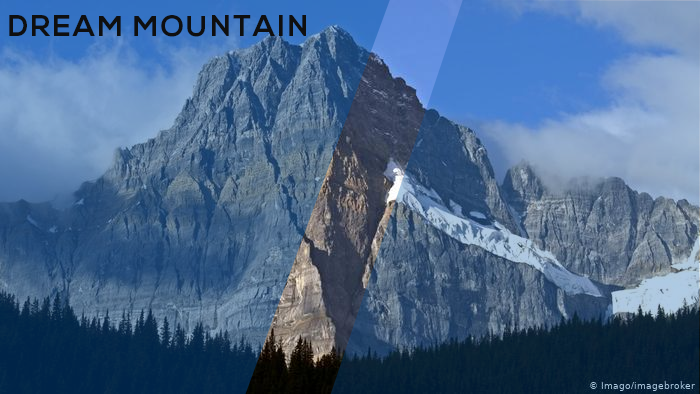
<style>
.page{position:relative;width:700px;height:394px}
.page>*{position:absolute;margin:0}
.t1{font:50px "NexaBold";letter-spacing:0.08em;color:#0f0f0f;text-transform:uppercase}
</style>
<div class="page">
<p class="t1" style="left:9px;top:15px;width:297px;height:22px">Dream Mountain</p>
</div>
